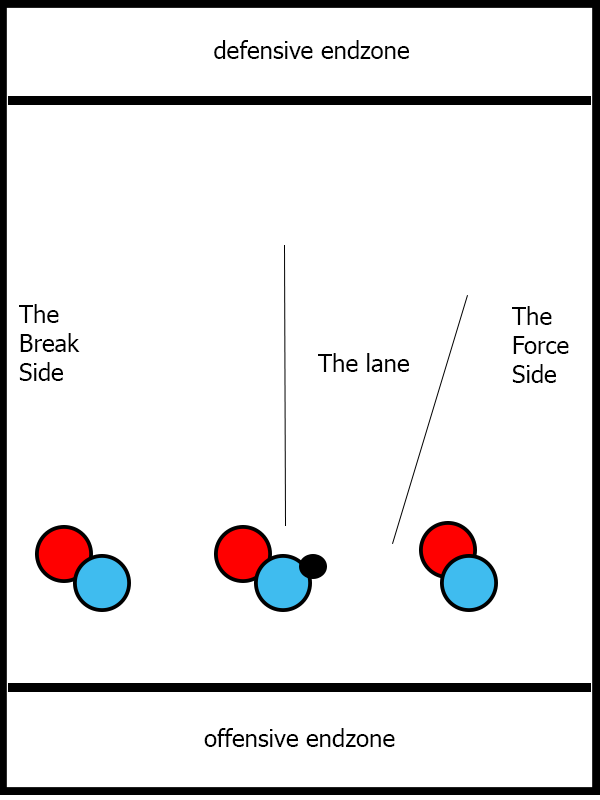
<style>
.page{position:relative;width:600px;height:800px;background:#ffffff}
.page>*{position:absolute;margin:0}
.t1{font:24px "Tahoma";color:#000000}
</style>
<div class="page">
<p class="t1" style="left:214px;top:40px;width:195px;height:19px">defensive endzone</p>
<p class="t1" style="left:19px;top:304px;width:61px;height:77px">The Break Side</p>
<p class="t1" style="left:512px;top:306px;width:57px;height:77px">The Force Side</p>
<p class="t1" style="left:318px;top:353px;width:91px;height:19px">The lane</p>
<p class="t1" style="left:204px;top:728px;width:191px;height:19px">offensive endzone</p>
</div>
